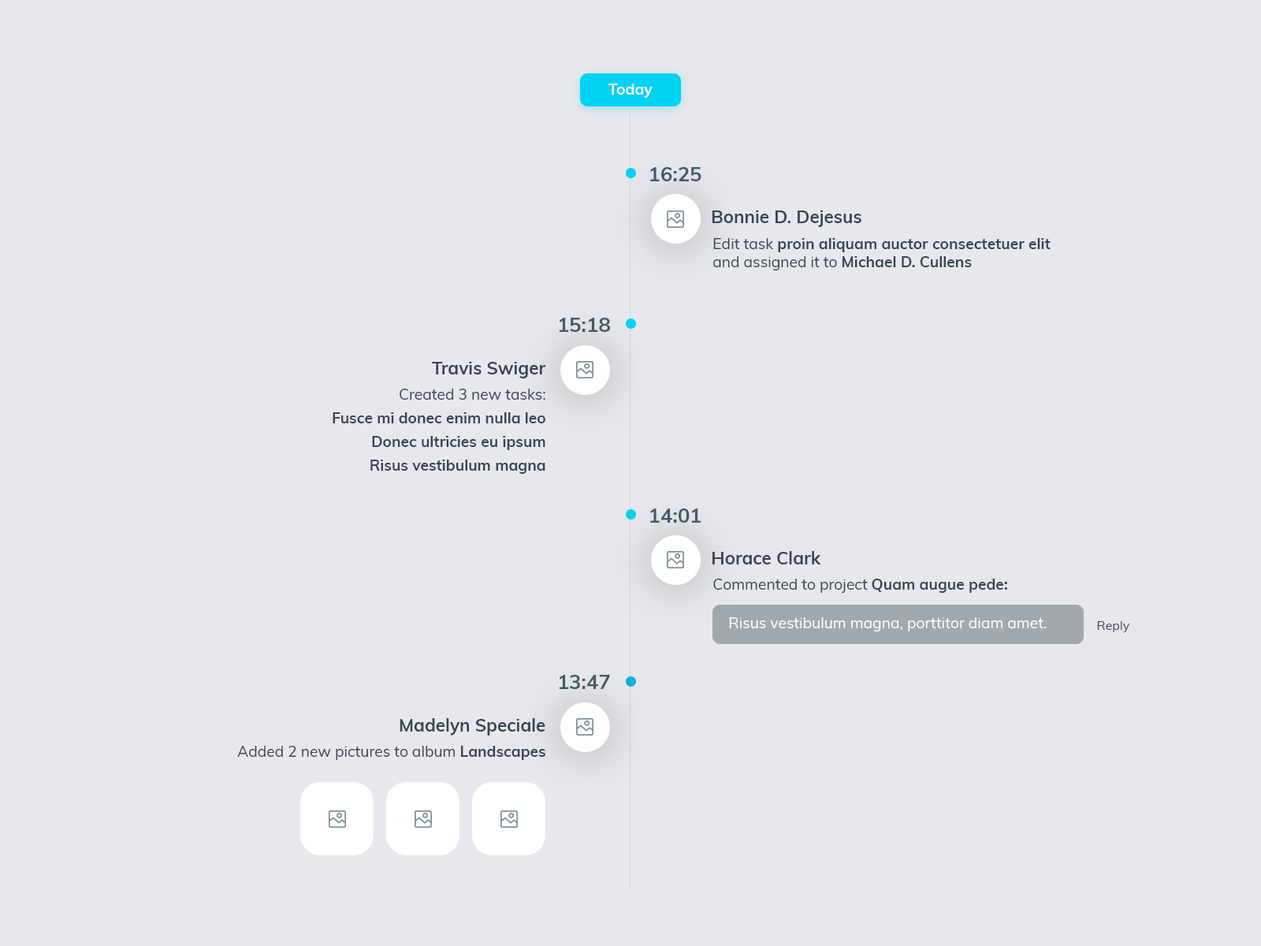
<style>
.page{position:relative;width:1261px;height:946px;background:#e7e8ed}
.page>*{position:absolute;margin:0}
.t1{font:15.1px "Muli-Bold";color:#ffffff}
.t2{font:20.2px "Muli-Bold";color:#455a64}
.t3{font:17.7px "Muli-Bold";color:#37474f}
.t4{font:15.1px "Muli-Bold";color:#37474f}
.t5{font:15.1px "Muli-Regular";color:#37474f}
.t6{font:15.1px/23.7px "Muli-Bold";color:#37474f}
.t7{font:15.1px "Muli-Regular";color:#ffffff}
.t8{font:12.6px "Muli-Regular";color:#37474f}
</style>
<div class="page">
<p class="t1" style="left:608px;top:84px;width:45px;height:14px">Today</p>
<p class="t2" style="left:650px;top:167px;width:51px;height:14px">16:25</p>
<p class="t3" style="left:712px;top:210px;width:149px;height:17px">Bonnie D. Dejesus</p>
<p class="t4" style="left:713px;top:238px;width:338px;height:32px"><span class="t5">Edit task</span> proin aliquam auctor consectetuer elit <span class="t5">and assigned it to </span>Michael D. Cullens</p>
<p class="t2" style="left:559px;top:318px;width:51px;height:14px">15:18</p>
<p class="t3" style="left:432px;top:362px;width:114px;height:16px">Travis Swiger</p>
<p class="t6" style="left:333px;top:389px;width:212px;height:85px;text-align:right"><span class="t5">Created 3 new tasks:<br> </span>Fusce mi donec enim nulla leo<br>Donec ultricies eu ipsum<br>Risus vestibulum magna</p>
<p class="t2" style="left:650px;top:508px;width:51px;height:14px">14:01</p>
<p class="t3" style="left:712px;top:551px;width:109px;height:13px">Horace Clark</p>
<p class="t5" style="left:713px;top:578px;width:294px;height:15px">Commented to project <span class="t4">Quam augue pede:</span></p>
<p class="t7" style="left:729px;top:617px;width:318px;height:14px">Risus vestibulum magna, porttitor diam amet.</p>
<p class="t8" style="left:1097px;top:621px;width:33px;height:12px">Reply</p>
<p class="t2" style="left:559px;top:675px;width:51px;height:14px">13:47</p>
<p class="t3" style="left:400px;top:718px;width:145px;height:17px">Madelyn Speciale</p>
<p class="t5" style="left:237px;top:746px;width:308px;height:14px">Added 2 new pictures to album <span class="t4">Landscapes</span></p>
</div>
